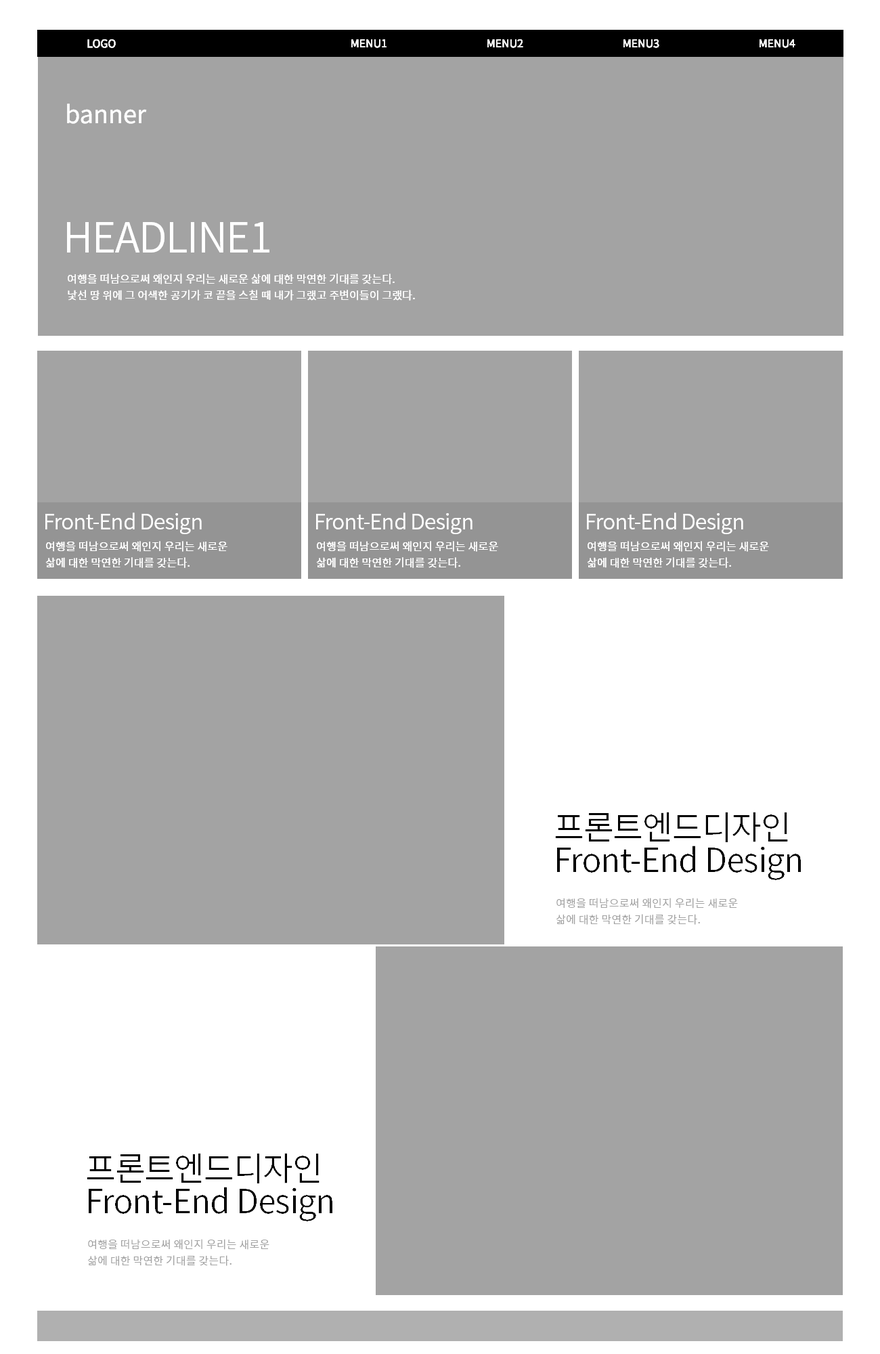
<style>
.page{position:relative;width:880px;height:1354px;background:#a3a3a3}
.page>*{position:absolute;margin:0}
.t1{font:10.8px "NotoSansCJKkr-Regular";color:#ffffff;text-transform:uppercase}
.t2{font:10.8px "NotoSansCJKkr-Regular";color:#ffffff}
.t3{font:24.4px "NotoSansCJKkr-Regular";color:#ffffff}
.t4{font:41.3px "NotoSansCJKkr-DemiLight";letter-spacing:-0.025em;color:#ffffff}
.t5{font:10.8px "NotoSansCJKkr-Regular";letter-spacing:0.01em;color:#fffefe}
.t6{font:21.2px "NotoSansCJKkr-DemiLight";letter-spacing:-0.025em;color:#ffffff}
.t7{font:10.8px "NotoSansCJKkr-Regular";letter-spacing:0.01em;color:#ffffff}
.t8{font:33.1px/32.5px "NotoSansCJKkr-DemiLight";letter-spacing:-0.025em;color:#000000}
.t9{font:10.8px "NotoSansCJKkr-Regular";letter-spacing:0.01em;color:#a3a3a3}
</style>
<div class="page">
<p class="t1" style="left:87px;top:39px;width:29px;height:9px">logo</p>
<p class="t2" style="left:351px;top:39px;width:36px;height:9px">MENU1</p>
<p class="t2" style="left:488px;top:39px;width:35px;height:9px">MENU2</p>
<p class="t2" style="left:624px;top:39px;width:36px;height:9px">MENU3</p>
<p class="t2" style="left:760px;top:39px;width:36px;height:9px">MENU4</p>
<p class="t3" style="left:67px;top:104px;width:80px;height:20px">banner</p>
<p class="t4" style="left:67px;top:222px;width:203px;height:31px">HEADLINE1</p>
<p class="t5" style="left:68px;top:274px;width:347px;height:27px;text-align:justify">여행을 떠남으로써 왜인지 우리는 새로운 삶에 대한 막연한 기대를 갖는다. <br>낯선 땅 위에 그 어색한 공기가 코 끝을 스칠 때 내가 그랬고 주변이들이 그랬다.</p>
<p class="t6" style="left:45px;top:513px;width:157px;height:21px">Front-End Design</p>
<p class="t6" style="left:316px;top:513px;width:157px;height:21px">Front-End Design</p>
<p class="t6" style="left:587px;top:513px;width:157px;height:21px">Front-End Design</p>
<p class="t7" style="left:45px;top:541px;width:183px;height:27px;text-align:justify">여행을 떠남으로써 왜인지 우리는 새로운 삶에 대한 막연한 기대를 갖는다.</p>
<p class="t7" style="left:316px;top:541px;width:182px;height:27px;text-align:justify">여행을 떠남으로써 왜인지 우리는 새로운 삶에 대한 막연한 기대를 갖는다.</p>
<p class="t7" style="left:587px;top:541px;width:182px;height:27px;text-align:justify">여행을 떠남으로써 왜인지 우리는 새로운 삶에 대한 막연한 기대를 갖는다.</p>
<p class="t8" style="left:555px;top:812px;width:246px;height:68px">프론트엔드디자인<br>Front-End Design</p>
<p class="t9" style="left:556px;top:898px;width:182px;height:27px;text-align:justify">여행을 떠남으로써 왜인지 우리는 새로운 삶에 대한 막연한 기대를 갖는다.</p>
<p class="t8" style="left:87px;top:1153px;width:246px;height:69px">프론트엔드디자인<br>Front-End Design</p>
<p class="t9" style="left:87px;top:1239px;width:183px;height:27px;text-align:justify">여행을 떠남으로써 왜인지 우리는 새로운 삶에 대한 막연한 기대를 갖는다.</p>
</div>
